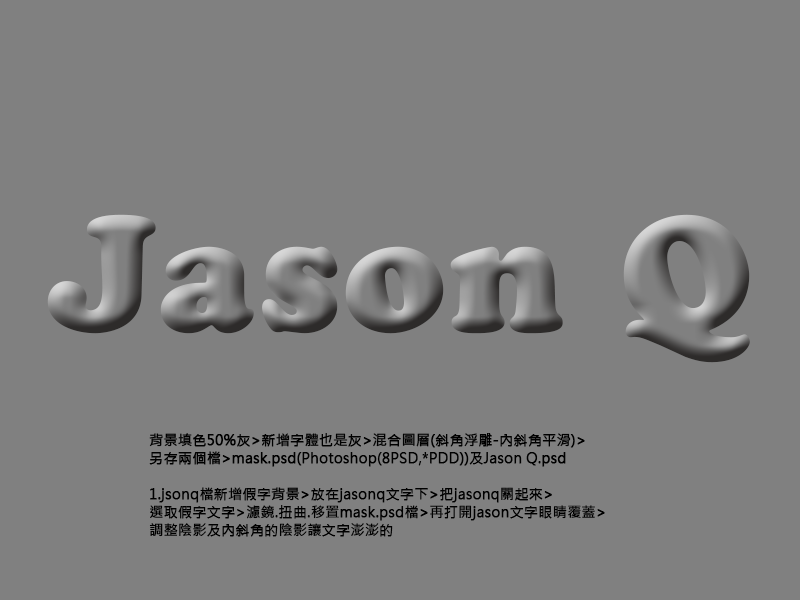
<style>
.page{position:relative;width:800px;height:600px;background:#808080}
.page>*{position:absolute;margin:0}
.t1{font:14px/18px "MicrosoftJhengHeiRegular";color:#000000;font-weight:bold}
</style>
<div class="page">
<p class="t1" style="left:149px;top:433px;width:456px;height:104px">背景填色50%灰&gt;新增字體也是灰&gt;混合圖層(斜角浮雕-內斜角平滑)&gt;<br>另存兩個檔&gt;mask.psd(Photoshop(8PSD,*PDD))及Jason Q.psd<br><br>1.jsonq檔新增假字背景&gt;放在jasonq文字下&gt;把jasonq關起來&gt;<br>選取假字文字&gt;濾鏡.扭曲.移置mask.psd檔&gt;再打開jason文字眼睛覆蓋&gt;<br>調整陰影及內斜角的陰影讓文字澎澎的</p>
</div>
